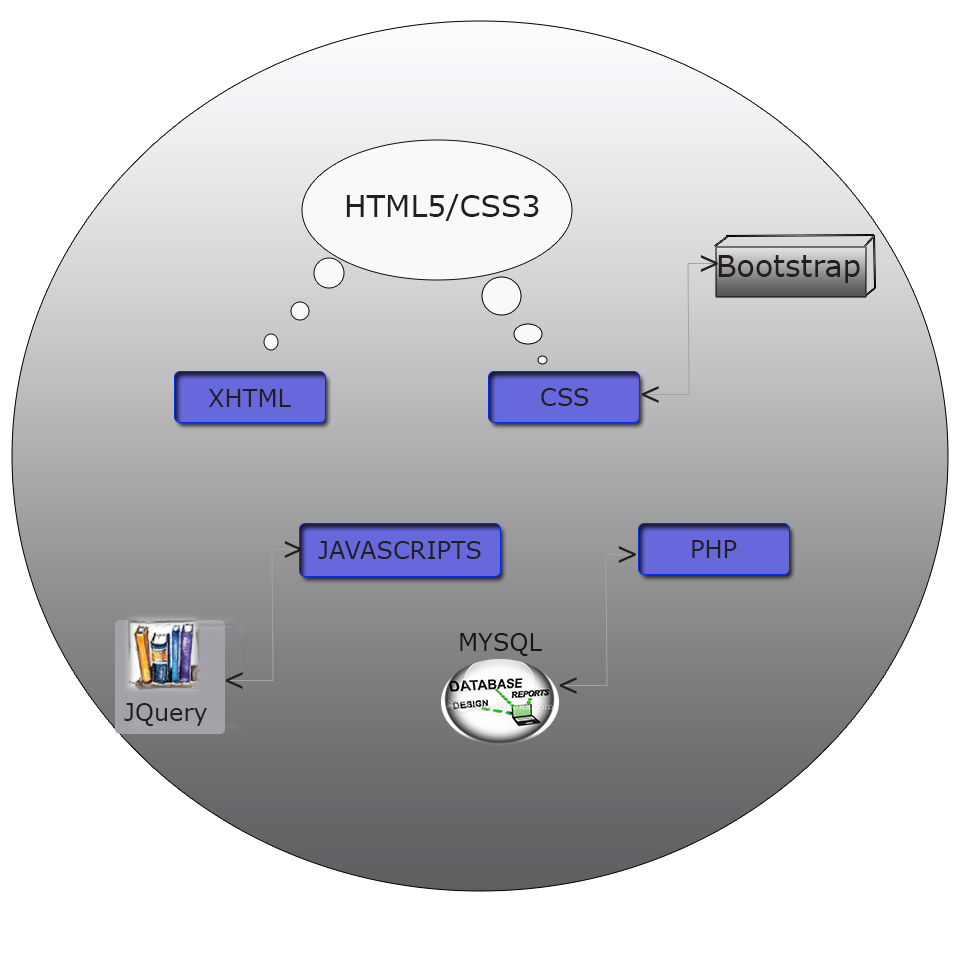
<style>
.page{position:relative;width:960px;height:960px;background:#ffffff}
.page>*{position:absolute;margin:0}
.t1{font:30px "Verdana";color:#251e1e}
.t2{font:24px "Verdana";color:#251e1e}
.t3{font:24px "Verdana";color:#181718}
</style>
<div class="page">
<p class="t1" style="left:346px;top:194px;width:193px;height:27px">HTML5/CSS3</p>
<p class="t1" style="left:718px;top:255px;width:142px;height:28px">Bootstrap</p>
<p class="t2" style="left:209px;top:389px;width:82px;height:18px">XHTML</p>
<p class="t2" style="left:541px;top:388px;width:47px;height:18px">CSS</p>
<p class="t2" style="left:318px;top:541px;width:163px;height:18px">JAVASCRIPTS</p>
<p class="t2" style="left:692px;top:540px;width:45px;height:18px">PHP</p>
<p class="t3" style="left:460px;top:633px;width:82px;height:23px">MYSQL</p>
<p class="t2" style="left:124px;top:703px;width:83px;height:23px">JQuery</p>
</div>
